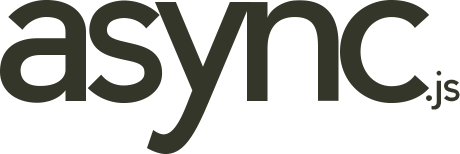
<style>
.page{position:relative;width:460px;height:154px;background:#ffffff}
.page>*{position:absolute;margin:0}
.t1{font:200px "PierSans";letter-spacing:-0.1em;color:#343629}
.t2{font:200px "PierSans";letter-spacing:-0.065em;color:#343629}
.t3{font:41.7px "PierSans";letter-spacing:-0.065em;color:#343629}
</style>
<div class="page">
<p class="t1" style="left:0px;top:0px;width:460px;height:154px">asyn<span class="t2">c</span><span class="t3">.js</span></p>
</div>
